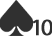
<style>
.page{position:relative;width:52px;height:36px;background:#ffffff}
.page>*{position:absolute;margin:0}
.t1{font:23.4px "MyriadPro-Regular";letter-spacing:-0.1em;color:#303030;font-weight:bold}
</style>
<div class="page">
<p class="t1" style="left:33px;top:19px;width:20px;height:17px">10</p>
</div>
